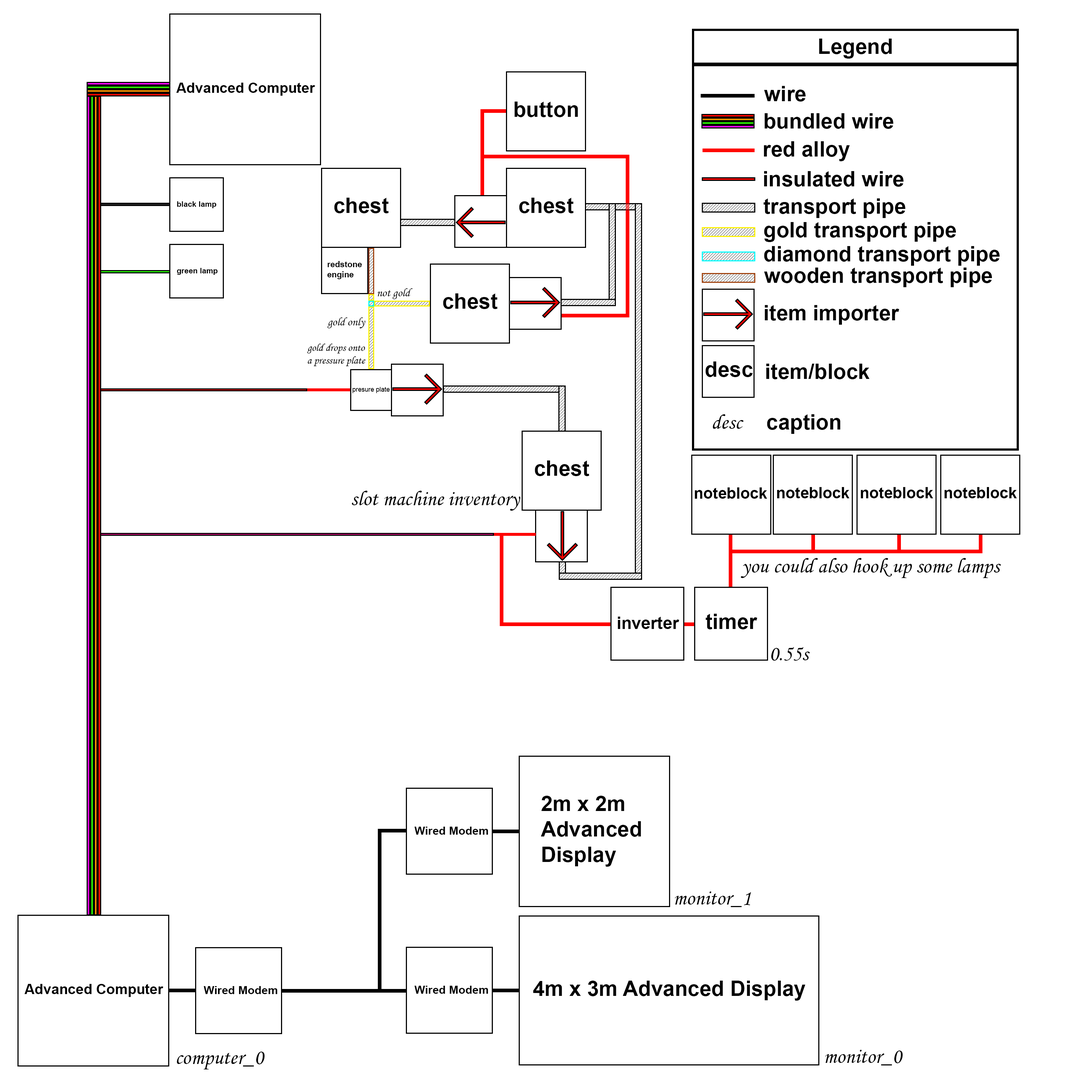
<style>
.page{position:relative;width:1092px;height:1092px;background:#ffffff}
.page>*{position:absolute;margin:0}
.t1{font:21.2px "Arial-BoldMT";color:#000000}
.t2{font:14.2px "Arial-BoldMT";color:#000000}
.t3{font:7.7px "Arial-BoldMT";color:#000000}
.t4{font:8.3px "Arial-BoldMT";color:#000000}
.t5{font:11.6px "MonotypeCorsiva";color:#000000}
.t6{font:10.6px "MonotypeCorsiva";color:#000000}
.t7{font:6.4px "ArialMT";color:#000000}
.t8{font:21.2px "MonotypeCorsiva";color:#000000}
.t9{font:15.5px "Arial-BoldMT";color:#000000}
.t10{font:17px "Arial-BoldMT";color:#000000}
.t11{font:11.4px "Arial-BoldMT";color:#000000}
</style>
<div class="page">
<p class="t1" style="left:819px;top:39px;width:73px;height:20px">Legend</p>
<p class="t2" style="left:176px;top:83px;width:139px;height:13px">Advanced Computer</p>
<p class="t1" style="left:764px;top:86px;width:42px;height:16px">wire</p>
<p class="t1" style="left:514px;top:102px;width:64px;height:15px">button</p>
<p class="t1" style="left:764px;top:113px;width:130px;height:16px">bundled wire</p>
<p class="t1" style="left:764px;top:141px;width:86px;height:20px">red alloy</p>
<p class="t1" style="left:764px;top:171px;width:140px;height:16px">insulated wire</p>
<p class="t1" style="left:334px;top:198px;width:55px;height:15px">chest</p>
<p class="t1" style="left:519px;top:198px;width:55px;height:15px">chest</p>
<p class="t3" style="left:177px;top:201px;width:39px;height:7px">black lamp</p>
<p class="t1" style="left:763px;top:198px;width:143px;height:20px">transport pipe</p>
<p class="t1" style="left:764px;top:222px;width:192px;height:20px">gold transport pipe</p>
<p class="t1" style="left:764px;top:246px;width:236px;height:20px">diamond transport pipe</p>
<p class="t3" style="left:177px;top:268px;width:41px;height:7px">green lamp</p>
<p class="t4" style="left:327px;top:261px;width:35px;height:18px">redstone<br>engine</p>
<p class="t1" style="left:764px;top:268px;width:228px;height:19px">wooden transport pipe</p>
<p class="t5" style="left:377px;top:288px;width:36px;height:11px">not gold</p>
<p class="t1" style="left:443px;top:293px;width:55px;height:16px">chest</p>
<p class="t1" style="left:765px;top:305px;width:134px;height:20px">item importer</p>
<p class="t5" style="left:327px;top:317px;width:38px;height:11px">gold only</p>
<p class="t6" style="left:307px;top:344px;width:58px;height:22px;text-align:center">gold drops onto<br>a pressure plate</p>
<p class="t1" style="left:705px;top:361px;width:48px;height:16px">desc</p>
<p class="t1" style="left:766px;top:364px;width:104px;height:15px">item/block</p>
<p class="t7" style="left:352px;top:387px;width:38px;height:6px">presure plate</p>
<p class="t8" style="left:713px;top:414px;width:31px;height:15px">desc</p>
<p class="t1" style="left:767px;top:414px;width:73px;height:20px">caption</p>
<p class="t1" style="left:535px;top:460px;width:54px;height:16px">chest</p>
<p class="t8" style="left:352px;top:491px;width:169px;height:20px">slot machine inventory</p>
<p class="t9" style="left:695px;top:487px;width:72px;height:12px">noteblock</p>
<p class="t9" style="left:777px;top:487px;width:73px;height:11px">noteblock</p>
<p class="t9" style="left:861px;top:487px;width:72px;height:11px">noteblock</p>
<p class="t9" style="left:945px;top:487px;width:72px;height:11px">noteblock</p>
<p class="t8" style="left:741px;top:558px;width:260px;height:20px">you could also hook up some lamps</p>
<p class="t10" style="left:618px;top:617px;width:61px;height:12px">inverter</p>
<p class="t1" style="left:705px;top:614px;width:52px;height:15px">timer</p>
<p class="t8" style="left:771px;top:647px;width:39px;height:14px">0.55s</p>
<p class="t1" style="left:541px;top:796px;width:100px;height:71px">2m x 2m <br>Advanced <br>Display</p>
<p class="t11" style="left:414px;top:827px;width:74px;height:8px">Wired Modem</p>
<p class="t8" style="left:675px;top:891px;width:76px;height:16px">monitor_1</p>
<p class="t2" style="left:24px;top:984px;width:139px;height:13px">Advanced Computer</p>
<p class="t11" style="left:203px;top:986px;width:74px;height:8px">Wired Modem</p>
<p class="t11" style="left:414px;top:986px;width:74px;height:8px">Wired Modem</p>
<p class="t1" style="left:533px;top:981px;width:273px;height:20px">4m x 3m Advanced Display</p>
<p class="t8" style="left:825px;top:1050px;width:78px;height:15px">monitor_0</p>
<p class="t8" style="left:177px;top:1052px;width:88px;height:17px">computer_0</p>
</div>
